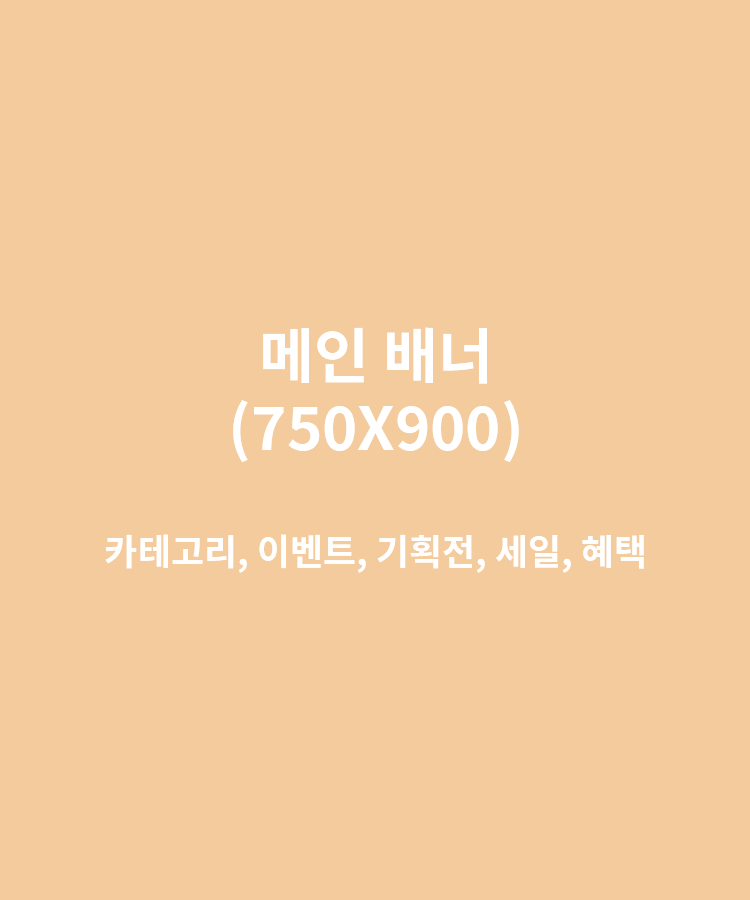
<style>
.page{position:relative;width:750px;height:900px;background:#f3cb9c}
.page>*{position:absolute;margin:0}
.t1{font:36px "NotoSansKR-Bold";color:#ffffff;text-transform:uppercase}
.t2{font:60px "NotoSansKR-Bold";color:#ffffff;text-transform:uppercase}
</style>
<div class="page">
<p class="t1" style="left:105px;top:327px;width:539px;height:246px;text-align:center"><span class="t2">메인 배너<br>(750x900)<br><br></span>카테고리, 이벤트, 기획전, 세일, 혜택</p>
</div>
